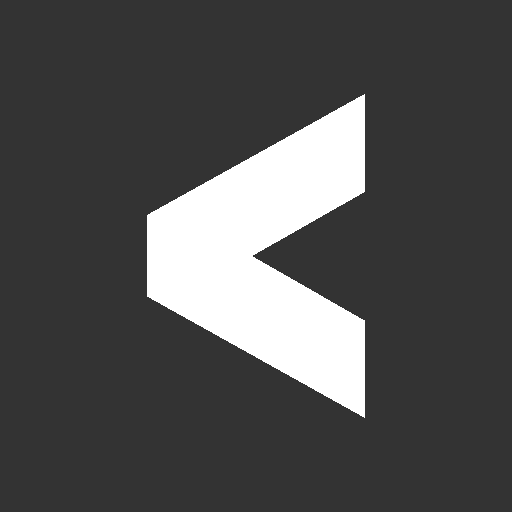
<style>
.page{position:relative;width:512px;height:512px;background:#333333}
.page>*{position:absolute;margin:0}
.t1{font:500px "BritannicBold";letter-spacing:-0.04em;color:#ffffff}
</style>
<div class="page">
<p class="t1" style="left:147px;top:94px;width:218px;height:324px">&lt;</p>
</div>
